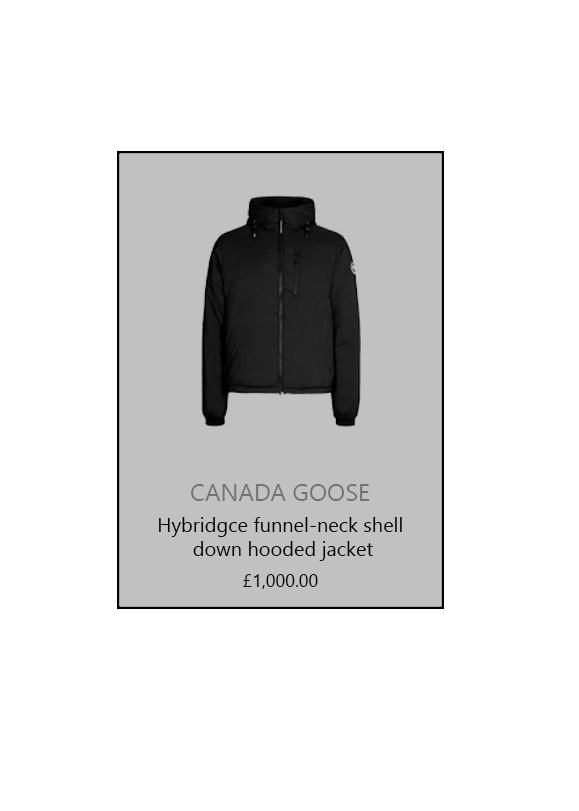
<style>
.page{position:relative;width:579px;height:811px;background:#ffffff}
.page>*{position:absolute;margin:0}
.t1{font:24px "Gadugi";color:#727272}
.t2{font:20px "Gadugi";color:#000000}
.t3{font:18px "Gadugi";color:#000000}
</style>
<div class="page">
<p class="t1" style="left:191px;top:484px;width:179px;height:17px">CANADA GOOSE</p>
<p class="t2" style="left:159px;top:517px;width:243px;height:44px;text-align:center">Hybridgce funnel-neck shell <br>down hooded jacket</p>
<p class="t3" style="left:243px;top:574px;width:75px;height:15px">£1,000.00</p>
</div>
